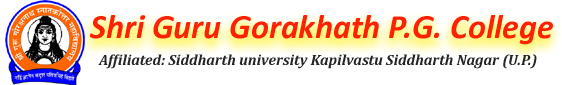
<style>
.page{position:relative;width:562px;height:85px;background:#ffffff}
.page>*{position:absolute;margin:0}
.t1{font:34px "Calibri-BoldItalic";color:#fe2103}
.t2{font:15px "Cambria-BoldItalic";color:#242424}
</style>
<div class="page">
<p class="t1" style="left:90px;top:15px;width:463px;height:30px">Shri Guru Gorakhath P.G. College</p>
<p class="t2" style="left:98px;top:54px;width:439px;height:15px">Affiliated: Siddharth university Kapilvastu Siddharth Nagar (U.P.)</p>
</div>
